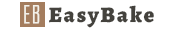
<style>
.page{position:relative;width:171px;height:30px;background:#ffffff}
.page>*{position:absolute;margin:0}
.t1{font:23.2px "AgencyFB-Reg";letter-spacing:0.1em;color:#f3f1e9;font-weight:bold;scale:0.8 1}
.t2{font:22px "AlegreyaRoman-Black";letter-spacing:0.1em;color:#44423d;font-weight:bold}
</style>
<div class="page">
<p class="t1" style="left:24px;top:5px;width:16px;height:19px">EB</p>
<p class="t2" style="left:49px;top:5px;width:105px;height:23px">EasyBake</p>
</div>
